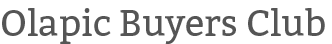
<style>
.page{position:relative;width:332px;height:44px;background:#ffffff}
.page>*{position:absolute;margin:0}
.t1{font:36px "Bitter-Regular";color:#555555}
</style>
<div class="page">
<p class="t1" style="left:2px;top:8px;width:323px;height:36px">Olapic Buyers Club</p>
</div>
